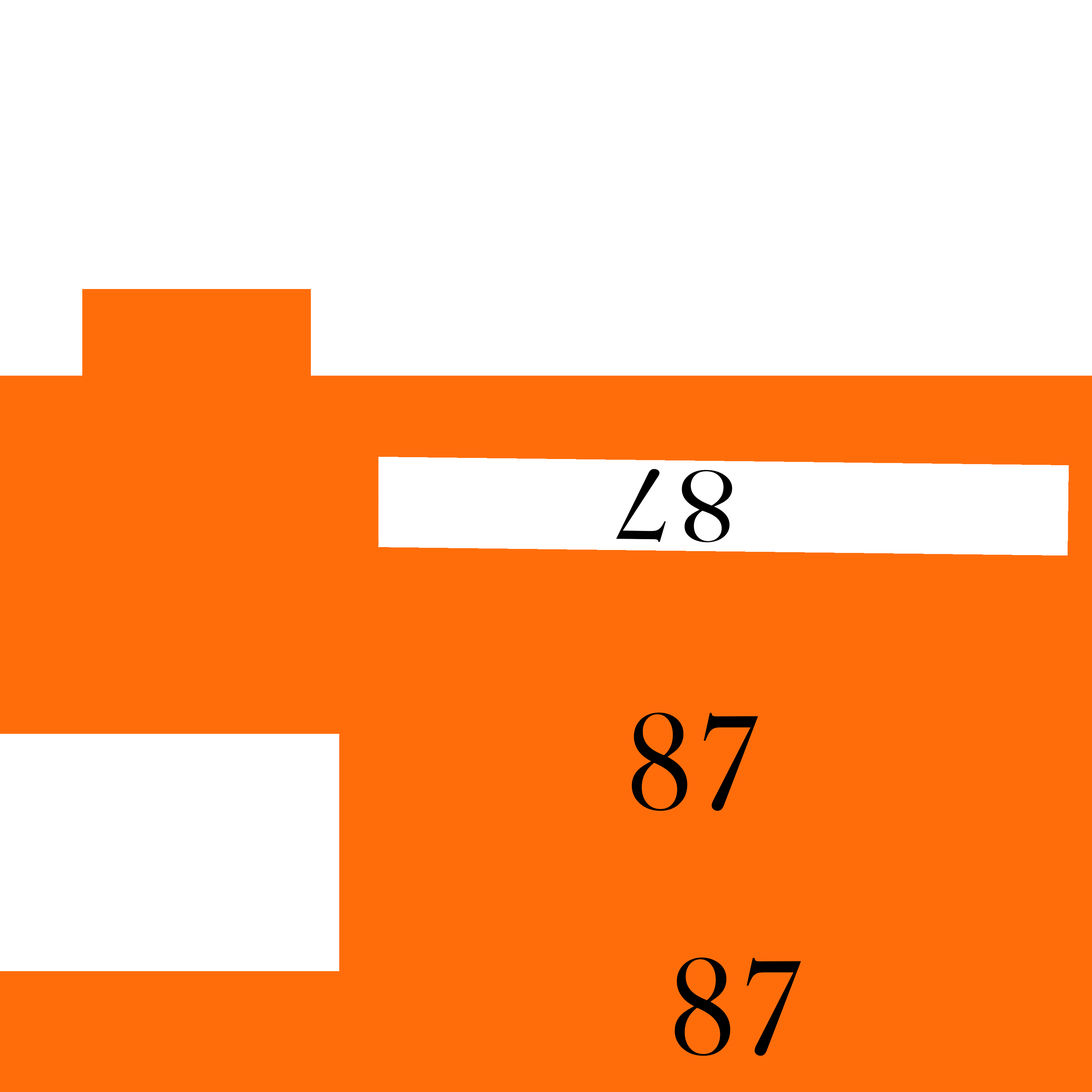
<style>
.page{position:relative;width:1092px;height:1092px;background:#ff6d0b}
.page>*{position:absolute;margin:0}
.t1{font:105.7px "BaskOldFace";color:#000000;font-weight:bold;scale:1.19 1}
.t2{font:142.1px "BaskOldFace";color:#000000;font-weight:bold;scale:0.97 1}
</style>
<div class="page">
<p class="t1" style="left:616px;top:469px;width:116px;height:73px;rotate:-179deg">87</p>
<p class="t2" style="left:632px;top:712px;width:126px;height:99px">87</p>
<p class="t2" style="left:674px;top:957px;width:127px;height:99px">87</p>
</div>
